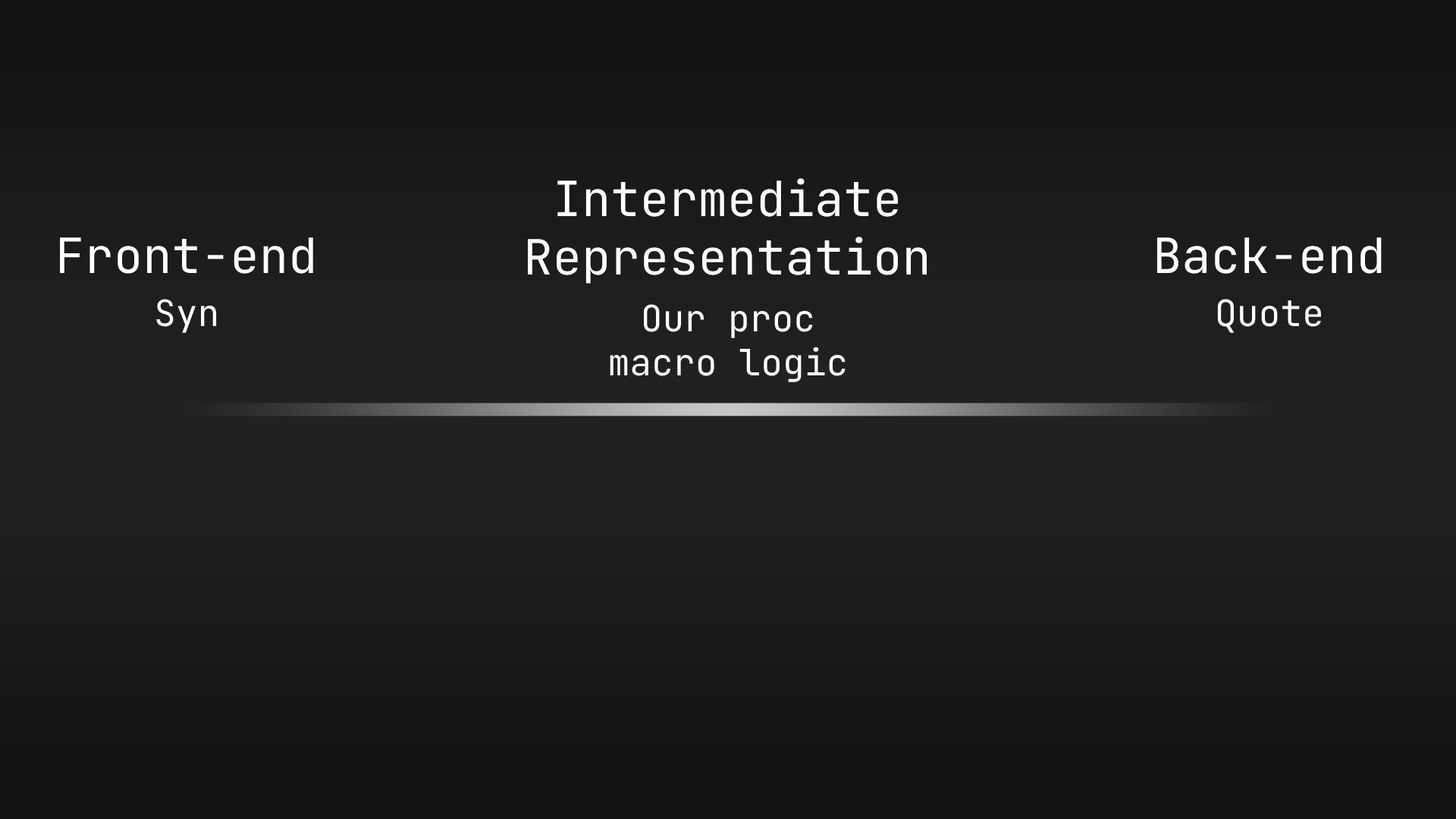
<style>
.page{position:relative;width:1456px;height:819px}
.page>*{position:absolute;margin:0}
.t1{font:48.5px "JetBrainsMono-Regular";color:#ffffff}
.t2{font:36.4px "JetBrainsMono-Regular";color:#ffffff}
</style>
<div class="page">
<p class="t1" style="left:528px;top:178px;width:399px;height:106px;text-align:center">Intermediate<br>Representation</p>
<p class="t1" style="left:60px;top:237px;width:253px;height:37px">Front-end</p>
<p class="t1" style="left:1156px;top:237px;width:226px;height:37px">Back-end</p>
<p class="t2" style="left:156px;top:299px;width:61px;height:34px">Syn</p>
<p class="t2" style="left:610px;top:304px;width:236px;height:78px;text-align:center">Our proc<br>macro logic</p>
<p class="t2" style="left:1217px;top:299px;width:104px;height:34px">Quote</p>
</div>
